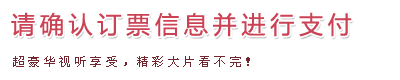
<style>
.page{position:relative;width:400px;height:80px;background:#ffffff}
.page>*{position:absolute;margin:0}
.t1{font:24px "MicrosoftYaHei";letter-spacing:0.2em;color:#cb4255}
.t2{font:12px "SimSun";letter-spacing:0.29em;color:#71252f}
</style>
<div class="page">
<p class="t1" style="left:11px;top:12px;width:341px;height:25px">请确认订票信息并进行支付</p>
<p class="t2" style="left:13px;top:56px;width:237px;height:11px">超豪华视听享受，精彩大片看不完！</p>
</div>
